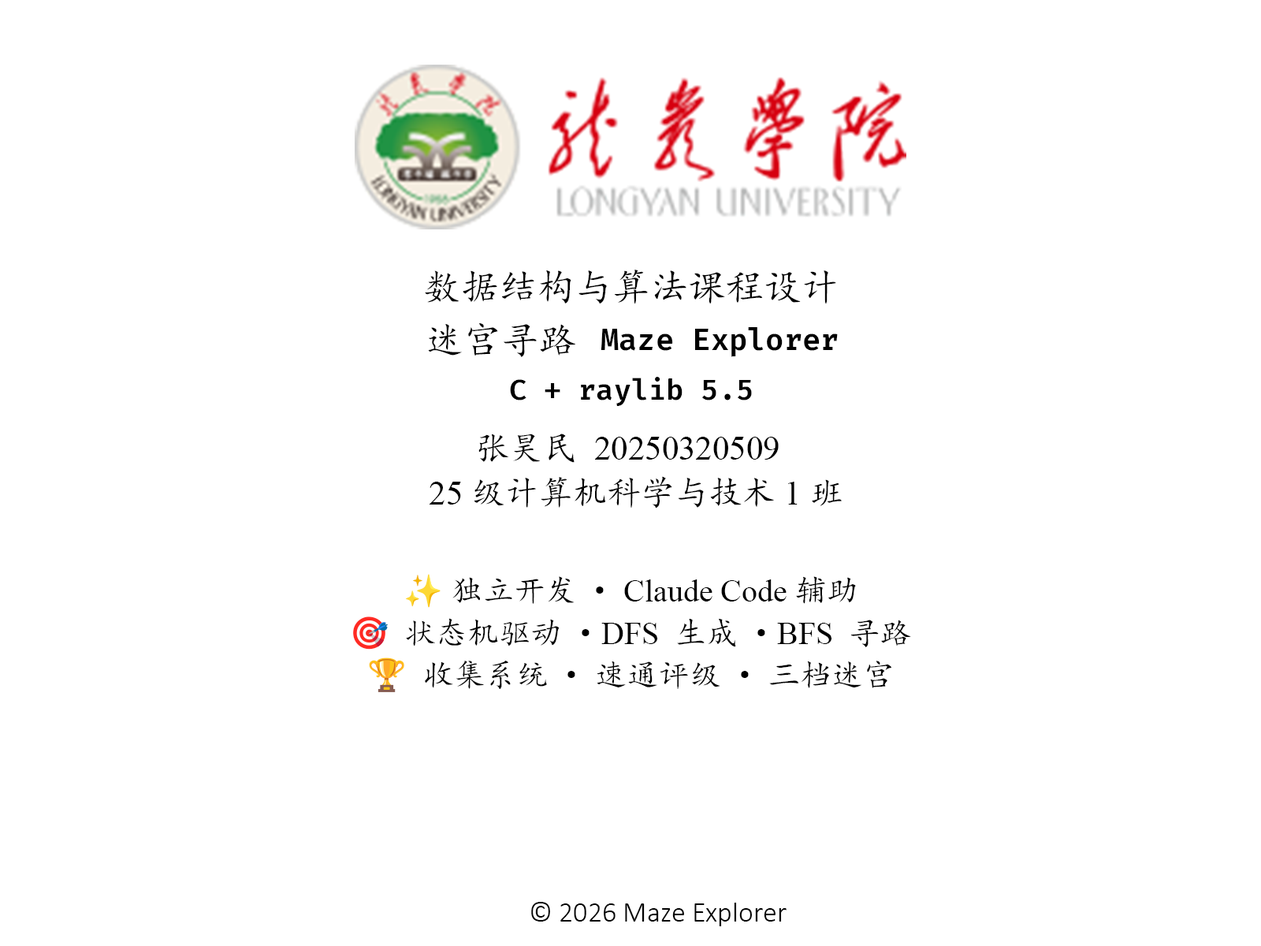
<style>
.page{position:relative;width:1261px;height:946px;background:#ffffff}
.page>*{position:absolute;margin:0}
.t1{font:37.8px "KaiTi";color:#000000}
.t2{font:29.8px "FiraCode-SemiBold";color:#000000}
.t3{font:28.4px "FiraCode-SemiBold";color:#000000}
.t4{font:33.8px/45.1px "TimesNewRomanPSMT";color:#000000}
.t5{font:33.8px/45.1px "KaiTi";color:#000000}
.t6{font:31.5px/42px "KaiTi";color:#000000}
.t7{font:31.5px/42px "NotoColorEmoji-SVG";color:#000000}
.t8{font:31.5px/42px "TimesNewRomanPSMT";color:#000000}
.t9{font:28.4px "Calibri-Light";color:#000000}
</style>
<div class="page">
<p class="t1" style="left:425px;top:270px;width:411px;height:34px">数据结构与算法课程设计</p>
<p class="t1" style="left:428px;top:323px;width:147px;height:34px">迷宫寻路</p>
<p class="t2" style="left:601px;top:327px;width:237px;height:30px">Maze Explorer</p>
<p class="t3" style="left:510px;top:377px;width:242px;height:29px">C + raylib 5.5</p>
<p class="t4" style="left:429px;top:433px;width:413px;height:75px;text-align:center"><span class="t5">张昊民 </span>20250320509 <br>25<span class="t5">级计算机科学与技术</span>1<span class="t5">班</span></p>
<p class="t6" style="left:353px;top:574px;width:558px;height:118px;text-align:center"><span class="t7">✨ </span>独立开发·<span class="t8"> Claude Code </span>辅助<br><span class="t7">🎯</span> 状态机驱动·<span class="t8">DFS</span> 生成·<span class="t8">BFS</span> 寻路<br><span class="t7">🏆</span> 收集系统·速通评级·三档迷宫</p>
<p class="t9" style="left:531px;top:902px;width:255px;height:24px">© 2026 Maze Explorer</p>
</div>
